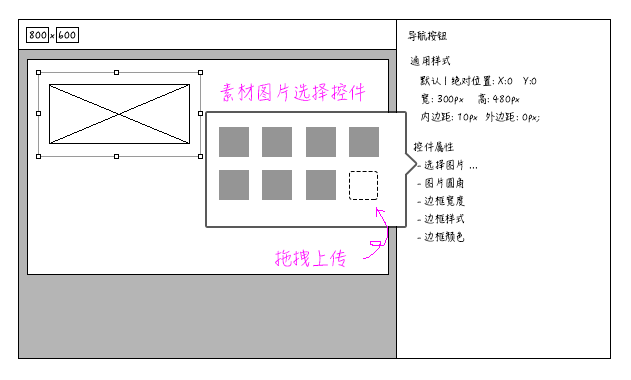
<style>
.page{position:relative;width:631px;height:380px;background:#ffffff}
.page>*{position:absolute;margin:0}
.t1{font:10px "HanziPenSC-W3";color:#000000}
.t2{font:10px/18px "HanziPenSC-W3";color:#000000}
.t3{font:10px/14px "HanziPenSC-W3";color:#000000}
.t4{font:18px "HanziPenSC-W3";color:#ff00ff}
</style>
<div class="page">
<p class="t1" style="left:407px;top:30px;width:40px;height:11px">导航按钮</p>
<p class="t1" style="left:410px;top:55px;width:41px;height:11px">通用样式</p>
<p class="t2" style="left:420px;top:75px;width:120px;height:48px"><span class="t3">默认 | 绝对位置: X:0   Y:0<br></span>宽: 300px    高: 480px<br>内边距: 10px  外边距: 0px;</p>
<p class="t4" style="left:220px;top:83px;width:146px;height:19px">素材图片选择控件</p>
<p class="t2" style="left:413px;top:141px;width:64px;height:101px">控件属性<br> - 选择图片 ...<br> - 图片圆角<br> - 边框宽度<br> - 边框样式<br> - 边框颜色</p>
<p class="t4" style="left:275px;top:249px;width:72px;height:19px">拖拽上传</p>
</div>
